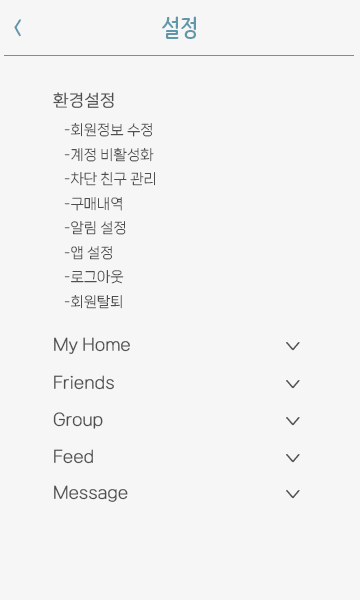
<style>
.page{position:relative;width:360px;height:600px;background:#f6f6f6}
.page>*{position:absolute;margin:0}
.t1{font:24px "NanumBarunpenOTF-Bold";color:#6097a9}
.t2{font:16px "NanumSquareNeo-Variable";color:#4e4e4e;font-weight:bold}
.t3{font:14px "NanumSquareNeo-Variable";color:#4e4e4e}
</style>
<div class="page">
<p class="t1" style="left:14px;top:16px;width:182px;height:23px">&lt;                      설정</p>
<p class="t2" style="left:53px;top:92px;width:61px;height:16px">환경설정</p>
<p class="t3" style="left:64px;top:123px;width:91px;height:186px">-회원정보 수정<br>-계정 비활성화<br>-차단 친구 관리<br>-구매내역<br>-알림 설정<br>-앱 설정<br>-로그아웃<br>-회원탈퇴</p>
<p class="t2" style="left:54px;top:337px;width:76px;height:17px">My Home</p>
<p class="t2" style="left:54px;top:375px;width:60px;height:15px">Friends</p>
<p class="t2" style="left:53px;top:412px;width:50px;height:17px">Group</p>
<p class="t2" style="left:54px;top:449px;width:39px;height:15px">Feed</p>
<p class="t2" style="left:54px;top:485px;width:74px;height:17px">Message</p>
</div>
